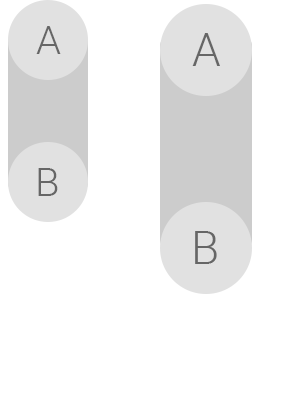
<style>
.page{position:relative;width:288px;height:416px;background:#ffffff}
.page>*{position:absolute;margin:0}
.t1{font:40px "Roboto-Light";color:#666666}
.t2{font:46px "Roboto-Light";color:#666666}
</style>
<div class="page">
<p class="t1" style="left:36px;top:26px;width:25px;height:28px">A</p>
<p class="t2" style="left:192px;top:33px;width:28px;height:33px">A</p>
<p class="t1" style="left:38px;top:168px;width:20px;height:28px">B</p>
<p class="t2" style="left:195px;top:231px;width:22px;height:33px">B</p>
</div>
